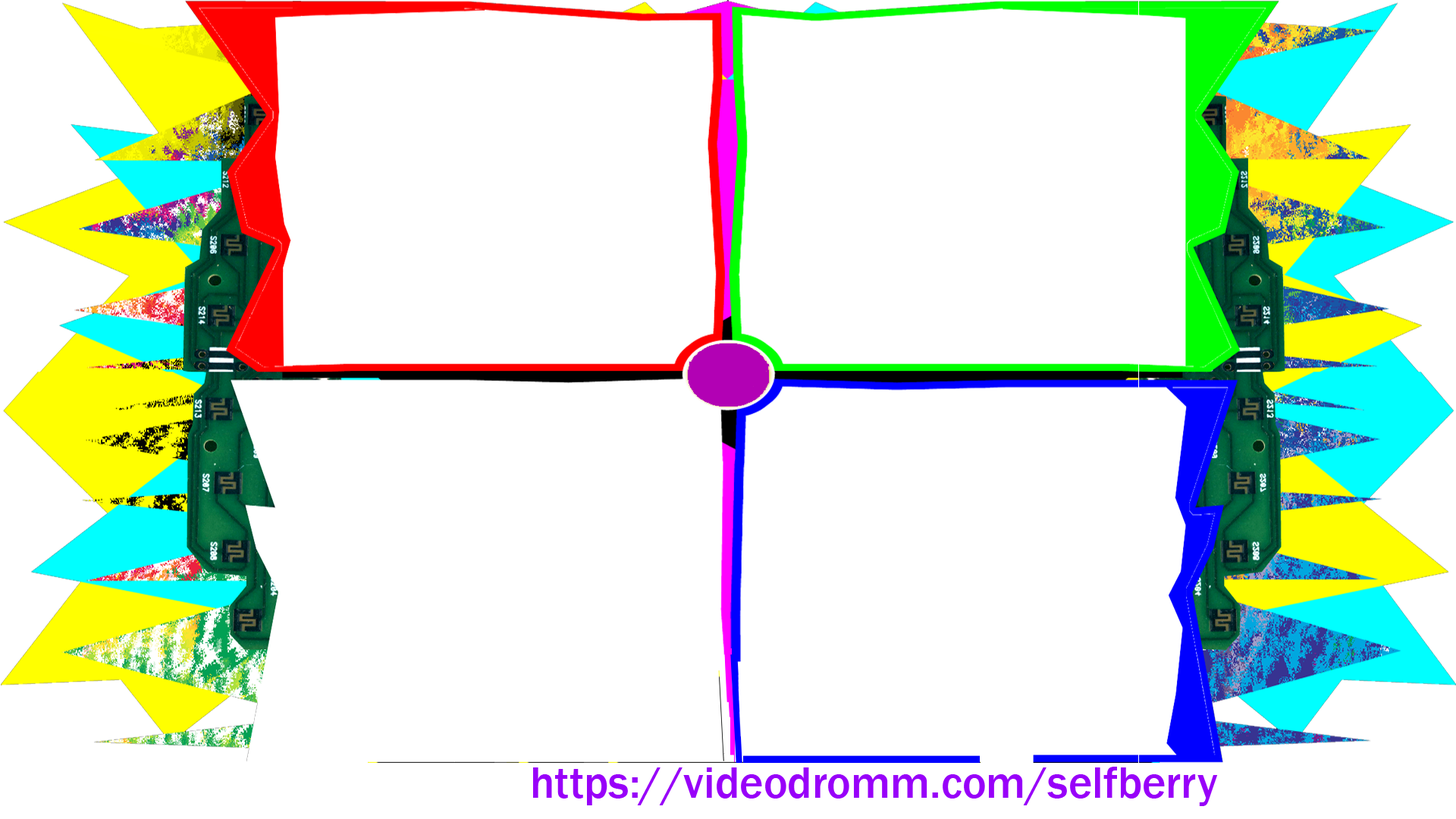
<style>
.page{position:relative;width:1456px;height:819px;background:#ffffff}
.page>*{position:absolute;margin:0}
.t1{font:45.5px "FranklinGothic-Medium";color:#9800f9}
</style>
<div class="page">
<p class="t1" style="left:533px;top:767px;width:685px;height:39px">https://videodromm.com/selfberry</p>
</div>
